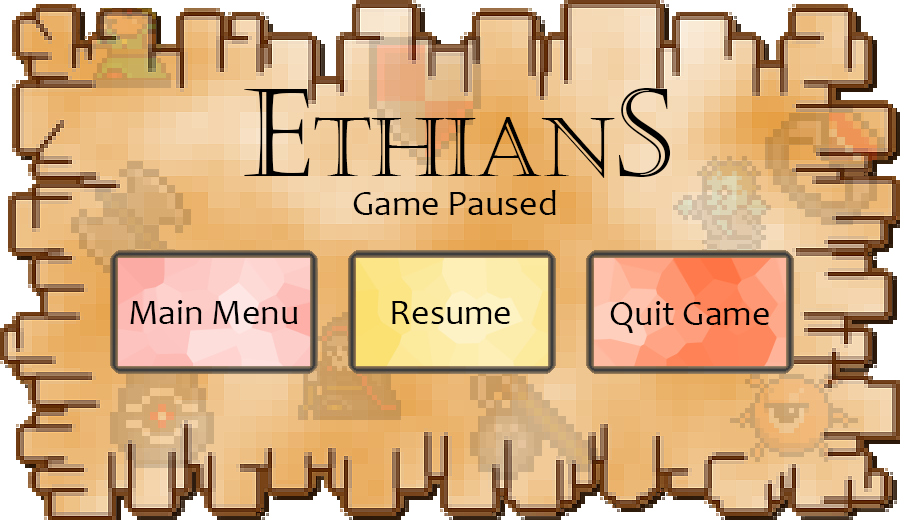
<style>
.page{position:relative;width:900px;height:520px}
.page>*{position:absolute;margin:0}
.t1{font:81px "Castellar";color:#000000}
.t2{font:121px "Castellar";color:#000000}
.t3{font:36px "Candara";color:#000000}
</style>
<div class="page">
<p class="t1" style="left:244px;top:88px;width:427px;height:90px"><span class="t2">E</span>thian<span class="t2">s</span></p>
<p class="t3" style="left:353px;top:190px;width:203px;height:25px">Game Paused</p>
<p class="t3" style="left:130px;top:300px;width:168px;height:24px">Main Menu</p>
<p class="t3" style="left:392px;top:301px;width:118px;height:23px">Resume</p>
<p class="t3" style="left:610px;top:301px;width:159px;height:32px">Quit Game</p>
</div>
